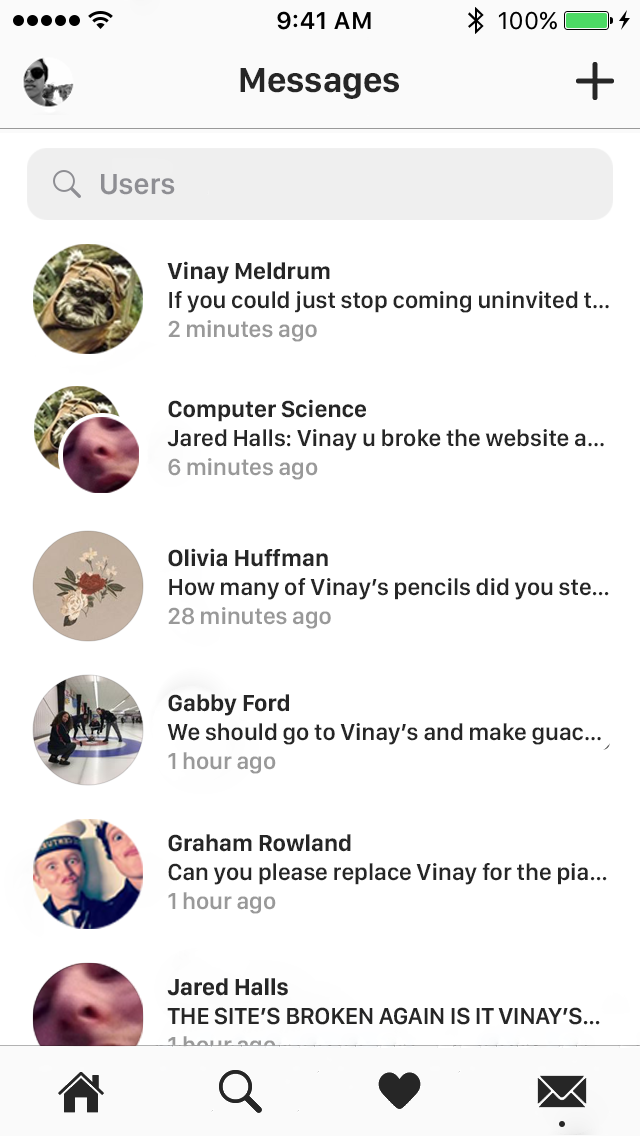
<style>
.page{position:relative;width:640px;height:1136px;background:#ffffff}
.page>*{position:absolute;margin:0}
.t1{font:36px "SanFranciscoDisplay-Bold";color:#262626}
.t2{font:30px "SanFranciscoDisplay-Semibold";color:#8e8e93}
.t3{font:24px "SanFranciscoDisplay-Semibold";color:#262626}
.t4{font:24px "SanFranciscoDisplay-Bold";color:#262626}
.t5{font:24px "SanFranciscoDisplay-Semibold";color:#999999}
</style>
<div class="page">
<p class="t1" style="left:240px;top:68px;width:159px;height:31px">Messages</p>
<p class="t2" style="left:101px;top:174px;width:74px;height:21px">Users</p>
<p class="t3" style="left:167px;top:261px;width:442px;height:81px"><span class="t4">Vinay Meldrum</span><br>If you could just stop coming uninvited t...<br><span class="t5">2 minutes ago</span></p>
<p class="t3" style="left:167px;top:399px;width:437px;height:81px"><span class="t4">Computer Science<br></span>Jared Halls: Vinay u broke the website a...<br><span class="t5">6 minutes ago</span></p>
<p class="t3" style="left:168px;top:548px;width:441px;height:81px"><span class="t4">Olivia Huffman<br></span>How many of Vinay’s pencils did you ste...<br><span class="t5">28 minutes ago</span></p>
<p class="t3" style="left:167px;top:694px;width:434px;height:80px"><span class="t4">Gabby Ford<br></span>We should go to Vinay’s and make guac...<br><span class="t5">1 hour ago</span></p>
<p class="t3" style="left:168px;top:834px;width:439px;height:80px"><span class="t4">Graham Rowland<br></span>Can you please replace Vinay for the pia...<br><span class="t5">1 hour ago</span></p>
</div>
